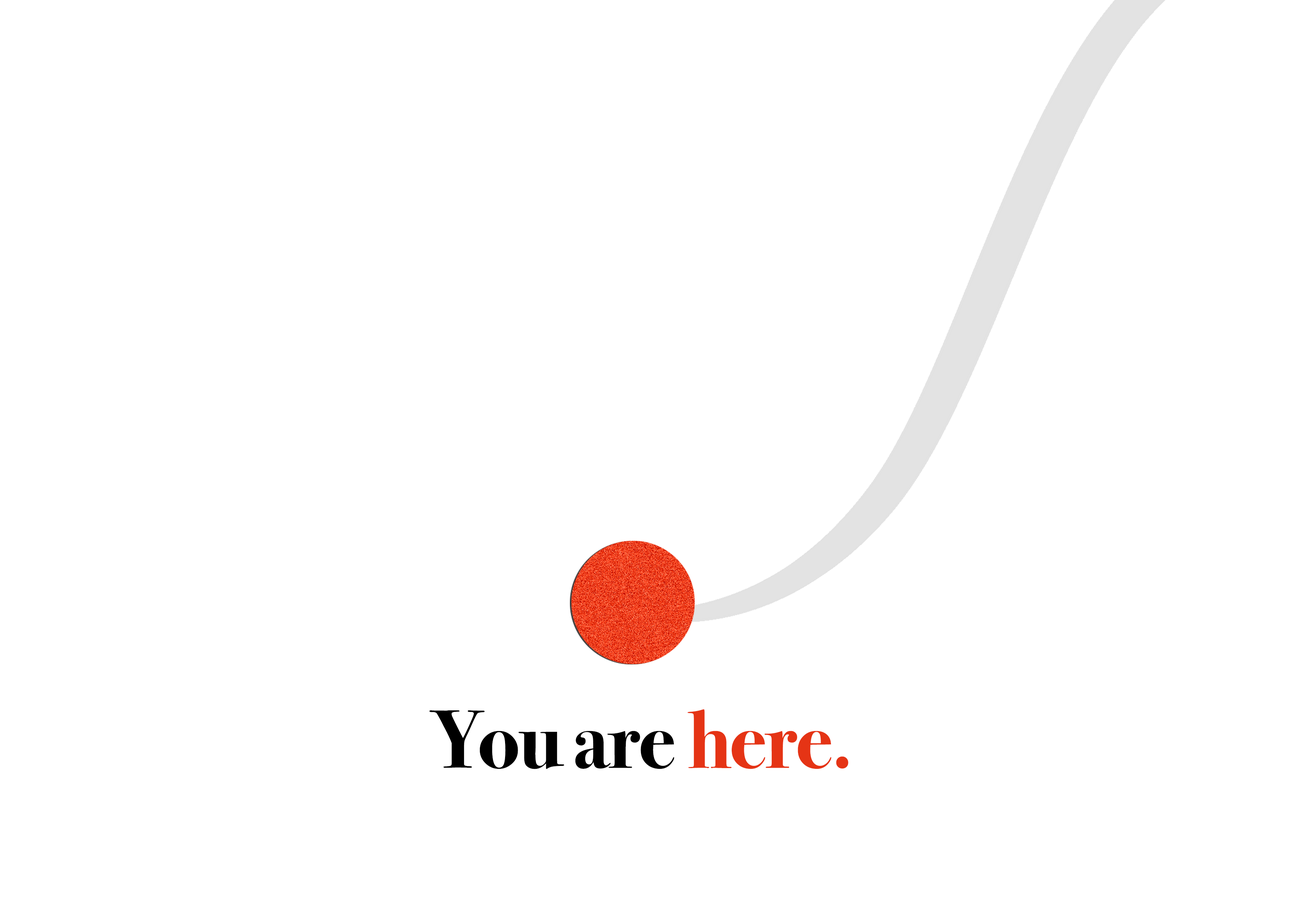
<style>
.page{position:relative;width:1299px;height:918px;background:#ffffff}
.page>*{position:absolute;margin:0}
.t1{font:82.7px "BodoniSvtyTwoITCTT-Bold";letter-spacing:-0.02em;color:#000000}
.t2{font:82.7px "BodoniSvtyTwoITCTT-Bold";letter-spacing:-0.02em;color:#e53415}
</style>
<div class="page">
<p class="t1" style="left:429px;top:709px;width:419px;height:60px">You are <span class="t2">here.</span></p>
</div>
